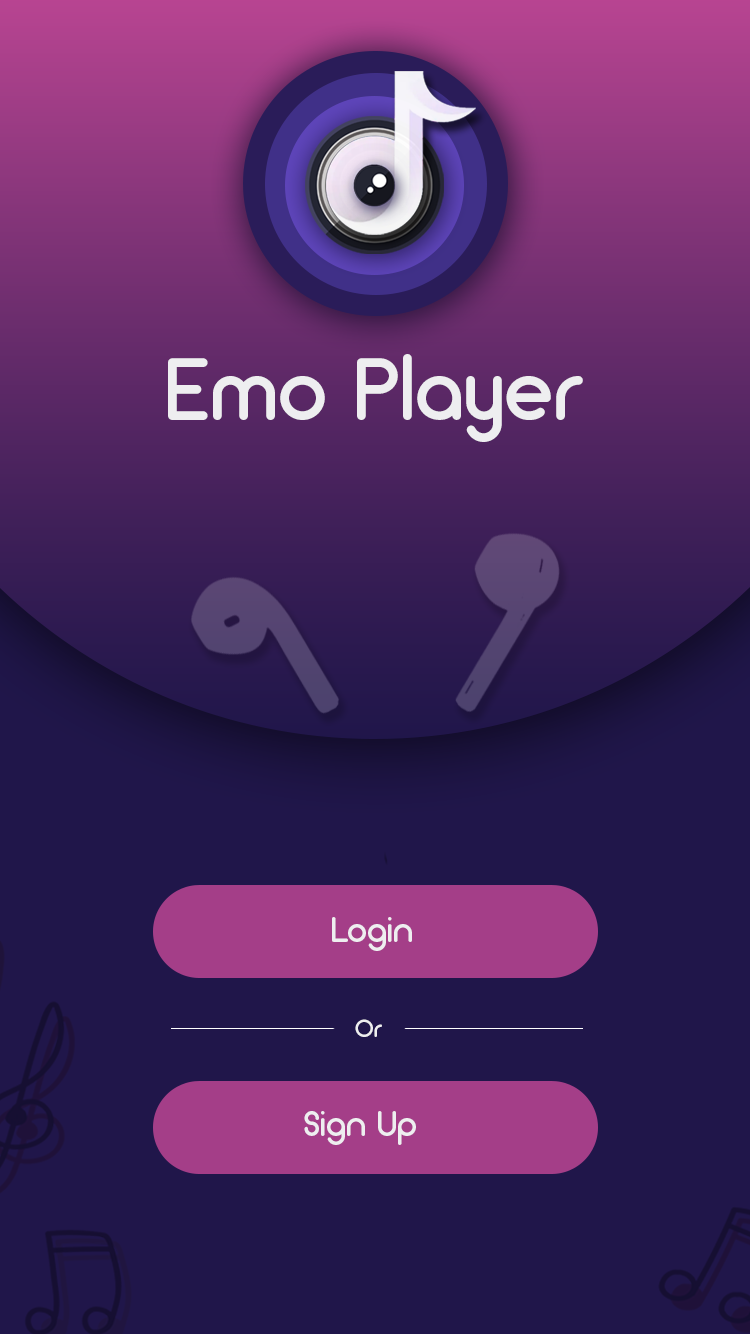
<style>
.page{position:relative;width:750px;height:1334px;background:#20164a}
.page>*{position:absolute;margin:0}
.t1{font:87.9px "Arciform";color:#eeeef0}
.t2{font:36px "Arciform";color:#eeeef0}
.t3{font:25px "Arciform";color:#eeeef0}
</style>
<div class="page">
<p class="t1" style="left:168px;top:354px;width:415px;height:88px">Emo Player</p>
<p class="t2" style="left:332px;top:917px;width:80px;height:34px">Login</p>
<p class="t3" style="left:355px;top:1019px;width:27px;height:18px">Or</p>
<p class="t2" style="left:304px;top:1111px;width:112px;height:34px">Sign Up</p>
</div>
